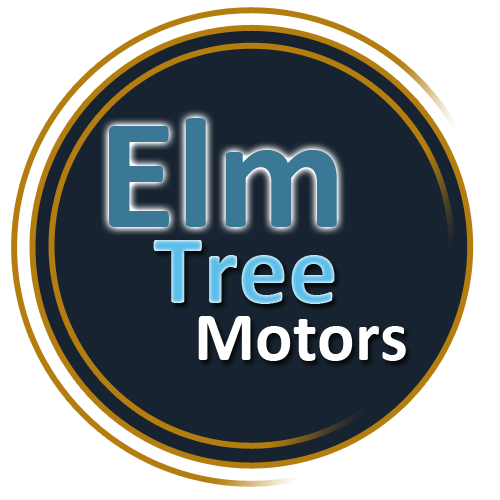
<style>
.page{position:relative;width:500px;height:500px;background:#172330}
.page>*{position:absolute;margin:0}
.t1{font:160px "Calibri-Bold";color:#3a7895}
.t2{font:100px "Calibri-Bold"}
.t3{font:70px "Calibri-Bold";color:#ffffff}
</style>
<div class="page">
<p class="t1" style="left:109px;top:118px;width:228px;height:109px">Elm</p>
<p class="t2" style="left:153px;top:240px;width:182px;height:64px">Tree</p>
<p class="t3" style="left:198px;top:316px;width:208px;height:45px">Motors</p>
</div>
